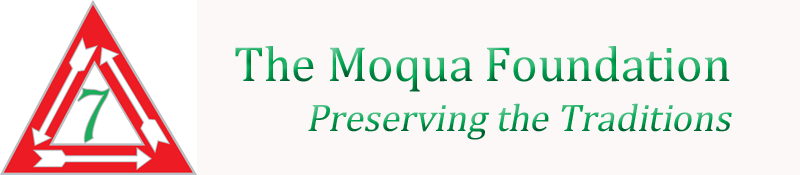
<style>
.page{position:relative;width:800px;height:175px;background:#fcf8f8}
.page>*{position:absolute;margin:0}
.t1{font:38.9px/50px "Cambria";font-style:italic}
.t2{font:50px/50px "Cambria"}
</style>
<div class="page">
<p class="t1" style="left:235px;top:46px;width:497px;height:94px"><span class="t2">The Moqua Foundation<br></span>  Preserving the Traditions</p>
</div>
